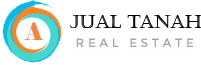
<style>
.page{position:relative;width:201px;height:65px;background:#ffffff}
.page>*{position:absolute;margin:0}
.t1{font:18px "Castellar";color:#000000}
.t2{font:24px "Elephant-Regular";color:#ef873e}
</style>
<div class="page">
<p class="t1" style="left:70px;top:15px;width:132px;height:13px">JUAL TANAH</p>
<p class="t2" style="left:23px;top:22px;width:21px;height:18px">A</p>
</div>
